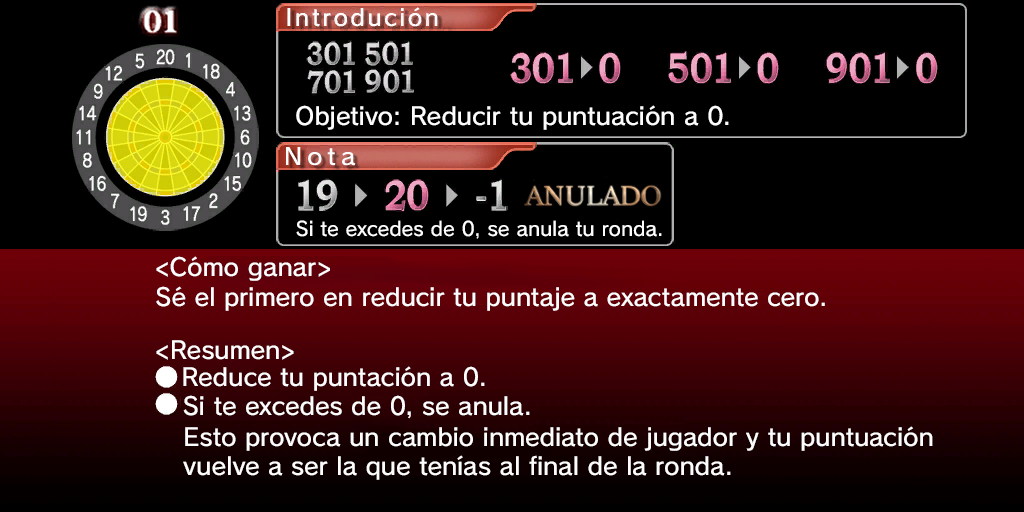
<style>
.page{position:relative;width:1024px;height:512px;background:#000000}
.page>*{position:absolute;margin:0}
.t1{font:24px "SCEPS3RodinLATIN-Regular";color:#fdfdfd}
.t2{font:19.4px "SCEPS3RodinLATIN-Regular";color:#fdfdfd}
</style>
<div class="page">
<p class="t1" style="left:296px;top:105px;width:433px;height:25px">Objetivo: Reducir tu puntuación a 0.</p>
<p class="t2" style="left:296px;top:220px;width:366px;height:19px">Si te excedes de 0, se anula tu ronda.</p>
<p class="t1" style="left:156px;top:256px;width:174px;height:25px">&lt;Cómo ganar&gt;</p>
<p class="t1" style="left:156px;top:286px;width:669px;height:25px">Sé el primero en reducir tu puntaje a exactamente cero.</p>
<p class="t1" style="left:156px;top:340px;width:138px;height:20px">&lt;Resumen&gt;</p>
<p class="t1" style="left:183px;top:366px;width:302px;height:25px">Reduce tu puntación a 0.</p>
<p class="t1" style="left:183px;top:395px;width:347px;height:24px">Si te excedes de 0, se anula.</p>
<p class="t1" style="left:183px;top:426px;width:750px;height:54px">Esto provoca un cambio inmediato de jugador y tu puntuación <br>vuelve a ser la que tenías al final de la ronda.</p>
</div>
